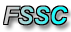
<style>
.page{position:relative;width:71px;height:32px;background:#ffffff}
.page>*{position:absolute;margin:0}
.t1{font:23.9px "Arial-BoldItalicMT"}
</style>
<div class="page">
<p class="t1" style="left:4px;top:6px;width:64px;height:19px">FSSC</p>
</div>
